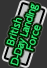
<style>
.page{position:relative;width:47px;height:68px;background:#333333}
.page>*{position:absolute;margin:0}
.t1{font:9px/10px "UDShinGoPro-Light";letter-spacing:-0.05em;color:#30e775;font-weight:bold}
.t2{font:9px/10px "UDShinGoPro-Light";color:#30e775;font-weight:bold}
</style>
<div class="page">
<p class="t1" style="left:6px;top:3px;width:35px;height:63px;text-align:center;rotate:-72deg"><span class="t2">British<br></span>D-Day Landing<br><span class="t2">Force</span></p>
</div>
